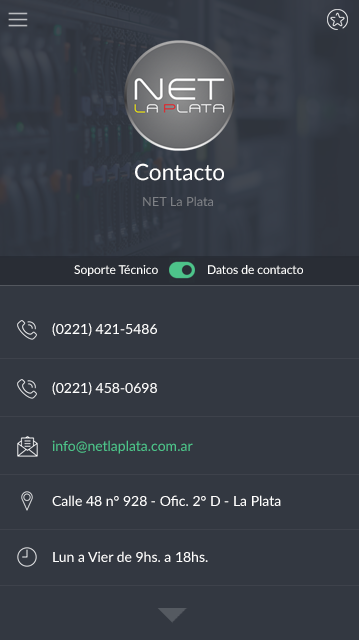
<style>
.page{position:relative;width:359px;height:640px;background:#333841}
.page>*{position:absolute;margin:0}
.t1{font:22.2px "Lato-Regular";color:#ffffff}
.t2{font:12.4px "Lato-Regular";color:#7e8085;scale:1.03 1}
.t3{font:12px "Lato-Regular";color:#ffffff}
.t4{font:14px "Lato-Regular";color:#ffffff}
.t5{font:14px "Lato-Regular";color:#4dc48a}
</style>
<div class="page">
<p class="t1" style="left:135px;top:163px;width:89px;height:18px">Contacto</p>
<p class="t2" style="left:143px;top:196px;width:70px;height:10px">NET La Plata</p>
<p class="t3" style="left:74px;top:265px;width:84px;height:11px">Soporte Técnico</p>
<p class="t3" style="left:208px;top:265px;width:95px;height:9px">Datos de contacto</p>
<p class="t4" style="left:52px;top:323px;width:105px;height:13px">(0221) 421-5486</p>
<p class="t4" style="left:52px;top:382px;width:105px;height:13px">(0221) 458-0698</p>
<p class="t5" style="left:52px;top:440px;width:141px;height:14px">info@netlaplata.com.ar</p>
<p class="t4" style="left:52px;top:495px;width:229px;height:11px">Calle 48 n° 928 - Ofic. 2° D - La Plata</p>
<p class="t4" style="left:53px;top:551px;width:155px;height:11px">Lun a Vier de 9hs. a 18hs.</p>
</div>
